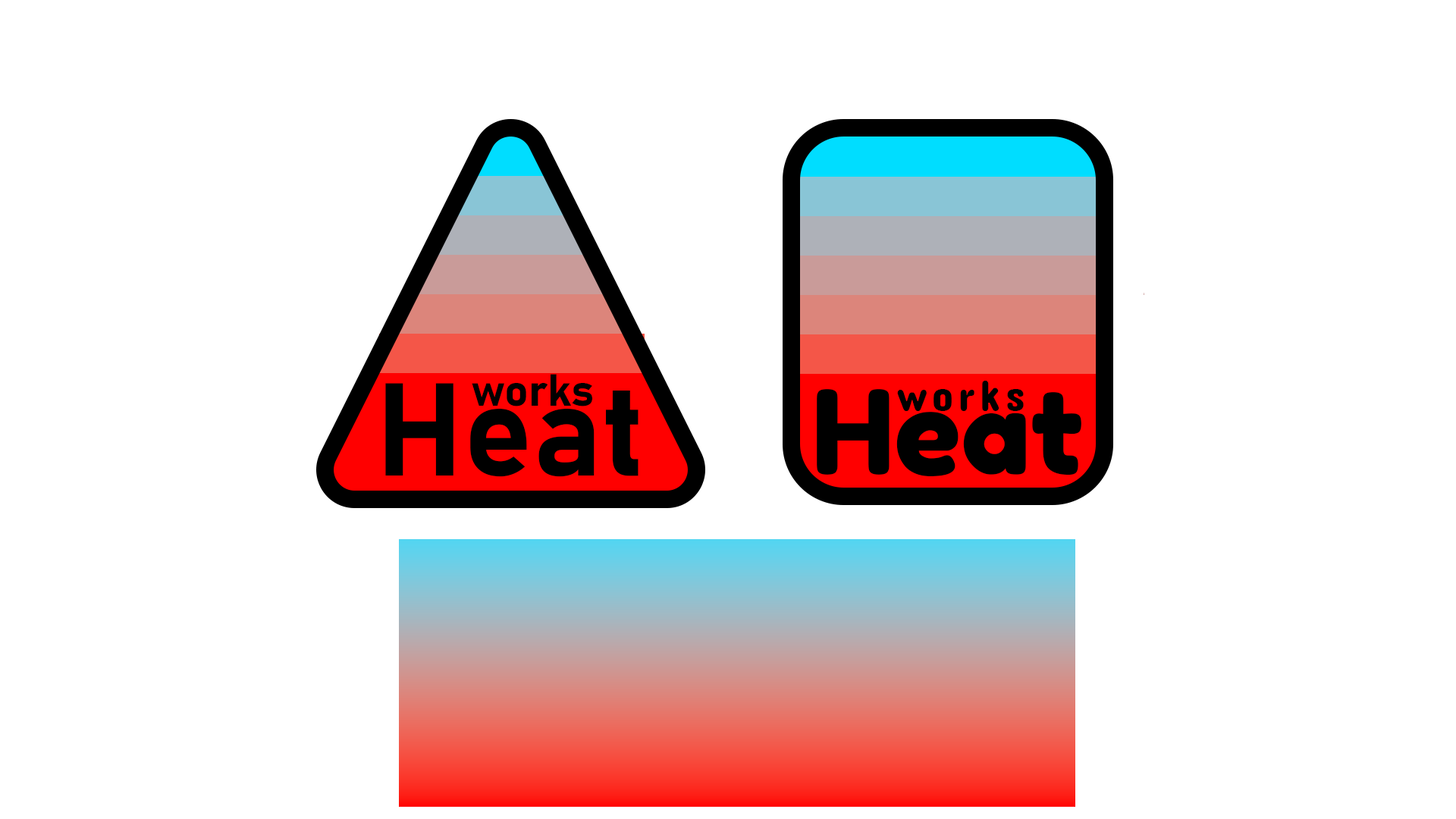
<style>
.page{position:relative;width:1456px;height:819px;background:#ffffff}
.page>*{position:absolute;margin:0}
.t1{font:44.3px "Bahnschrift-Bold";color:#000000}
.t2{font:129.8px "Bahnschrift-Bold";color:#000000}
.t3{font:117.1px "FredokaOne-Regular";color:#000000}
.t4{font:44.3px "ConcertOne-Regular";letter-spacing:0.1em;color:#000000}
</style>
<div class="page">
<p class="t1" style="left:472px;top:374px;width:120px;height:32px">works</p>
<p class="t2" style="left:385px;top:383px;width:254px;height:94px">Heat</p>
<p class="t3" style="left:817px;top:389px;width:264px;height:87px">Heat</p>
<p class="t4" style="left:897px;top:381px;width:127px;height:30px">works</p>
</div>
